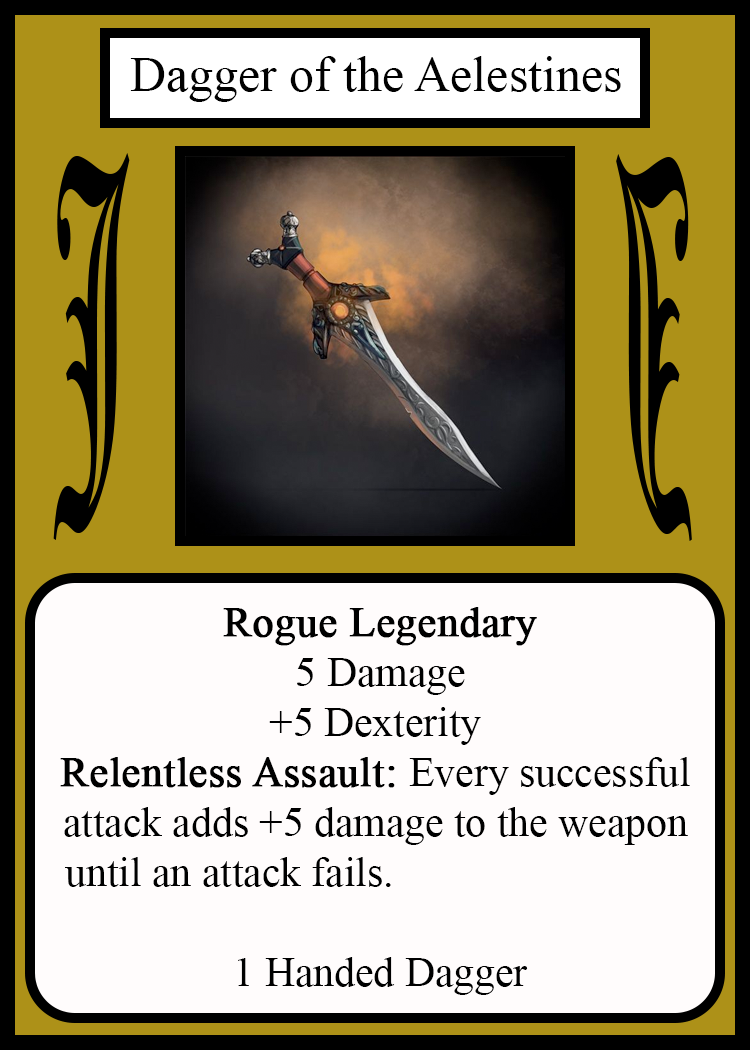
<style>
.page{position:relative;width:750px;height:1050px;background:#fffcfc}
.page>*{position:absolute;margin:0}
.t1{font:50px "TimesNewRomanPSMT";color:#010101}
.t2{font:450.1px "OldEnglishTextMT";color:#000000;scale:0.26 1}
.t3{font:449.7px "OldEnglishTextMT";color:#000000;scale:0.26 1}
.t4{font:41.7px "TimesNewRomanPSMT";color:#000000}
.t5{font:41.7px "TimesNewRomanPSMT";color:#000000;font-weight:bold}
</style>
<div class="page">
<p class="t1" style="left:130px;top:56px;width:491px;height:46px">Dagger of the Aelestines</p>
<p class="t2" style="left:53px;top:153px;width:77px;height:387px">J</p>
<p class="t3" style="left:616px;top:154px;width:76px;height:387px;rotate:180deg">J</p>
<p class="t4" style="left:60px;top:607px;width:630px;height:388px;text-align:center"><span class="t5">Rogue Legendary<br></span> 5 Damage<br>+5 Dexterity<br><span class="t5">Relentless Assault: </span>Every successful<br>attack adds +5 damage to the weapon<br>until an attack fails.                            <br><br> 1 Handed Dagger</p>
</div>
